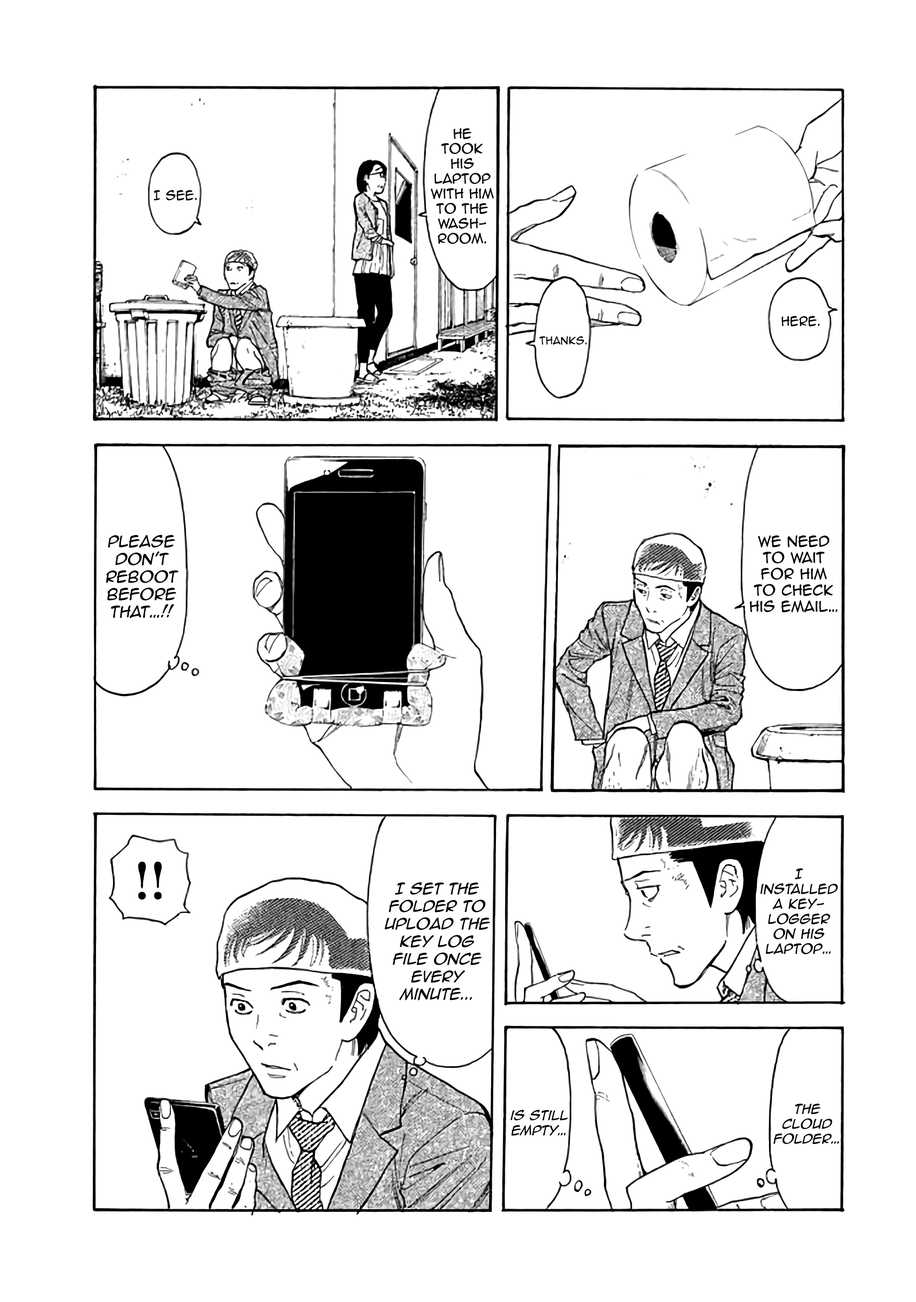
<style>
.page{position:relative;width:916px;height:1302px;background:#ffffff}
.page>*{position:absolute;margin:0}
.t1{font:12.5px "AnimeAce2.0BB";color:#000000}
.t2{font:11.9px "AnimeAce2.0BB";color:#000000}
.t3{font:9.8px "AnimeAce2.0BB";color:#000000}
.t4{font:14.6px "AnimeAce2.0BB";color:#000000;font-style:italic}
.t5{font:13.6px "AnimeAce2.0BB";color:#000000}
.t6{font:12.5px "AnimeAce2.0BB";color:#000000;font-style:italic}
.t7{font:14.6px "AnimeAce2.0BB-Italic";color:#000000}
.t8{font:12.5px "AnimeAce2.0BB-Italic";color:#000000}
</style>
<div class="page">
<p class="t1" style="left:431px;top:128px;width:63px;height:116px;text-align:center">He <br>took his <br>laptop with him to the wash-<br>room.</p>
<p class="t2" style="left:154px;top:190px;width:43px;height:11px">I see.</p>
<p class="t2" style="left:781px;top:316px;width:39px;height:11px">Here.</p>
<p class="t3" style="left:539px;top:336px;width:48px;height:9px">Thanks.</p>
<p class="t4" style="left:106px;top:535px;width:72px;height:83px;text-align:center">Please <br>don't <br>reboot <br>before <br>that…!!</p>
<p class="t5" style="left:750px;top:535px;width:88px;height:78px;text-align:center">We need <br>to wait <br>for him <br>to check his email…</p>
<p class="t6" style="left:760px;top:868px;width:78px;height:86px;text-align:center">I <br>installed a key-<br>logger <br>on his<br>laptop…</p>
<p class="t7" style="left:384px;top:882px;width:106px;height:118px;text-align:center">I set the folder to upload the <br>key log <br>file once <br>every <br>minute...</p>
<p class="t8" style="left:511px;top:1109px;width:57px;height:27px;text-align:center">is still <br>empty…</p>
<p class="t8" style="left:773px;top:1104px;width:66px;height:40px;text-align:center">the <br>Cloud folder…</p>
</div>
